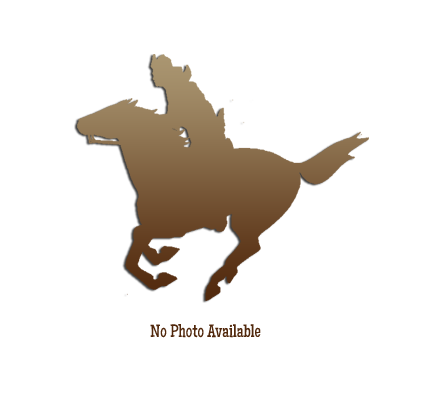
<style>
.page{position:relative;width:424px;height:399px;background:#ffffff}
.page>*{position:absolute;margin:0}
.t1{font:18px "MaidenOrange-Regular";color:#51280c}
</style>
<div class="page">
<p class="t1" style="left:150px;top:324px;width:111px;height:14px">No Photo Available</p>
</div>
